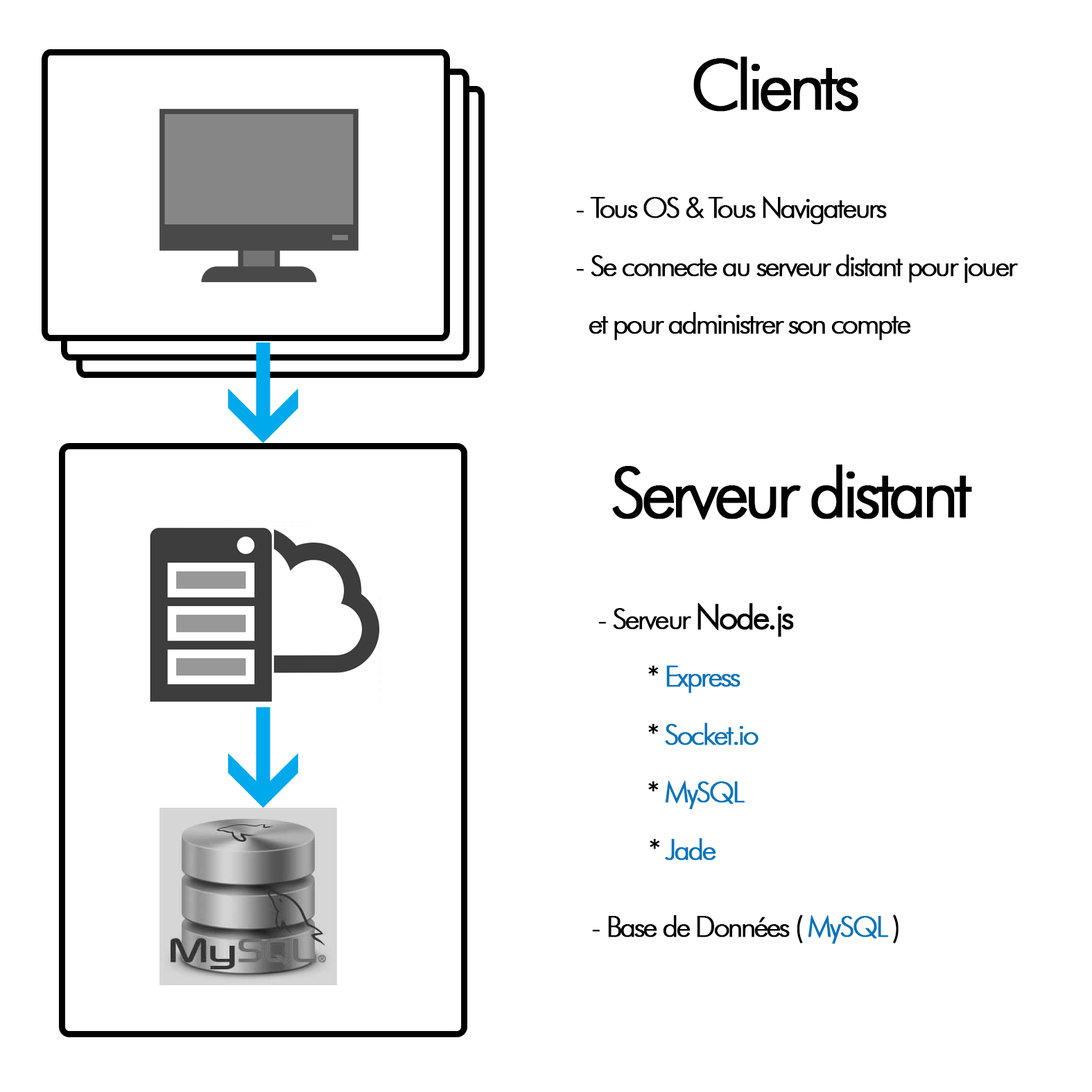
<style>
.page{position:relative;width:1092px;height:1092px;background:#ffffff}
.page>*{position:absolute;margin:0}
.t1{font:69.3px "FuturaBT-Light";letter-spacing:-0.09em;color:#000000;font-weight:bold}
.t2{font:28.9px/57.8px "FuturaBT-Light";letter-spacing:-0.09em;color:#000000;font-weight:bold}
.t3{font:34.7px/57.8px "FuturaBT-Light";letter-spacing:-0.09em;color:#000000;font-weight:bold}
.t4{font:28.9px/57.8px "FuturaBT-Light";letter-spacing:-0.09em;color:#0074ba;font-weight:bold}
.t5{font:28.9px "FuturaBT-Light";letter-spacing:-0.09em;color:#000000;font-weight:bold}
.t6{font:28.9px "FuturaBT-Light";letter-spacing:-0.09em;color:#0074ba;font-weight:bold}
</style>
<div class="page">
<p class="t1" style="left:693px;top:56px;width:165px;height:56px">Clients</p>
<p class="t2" style="left:576px;top:196px;width:442px;height:144px">- Tous OS &amp; Tous Navigateurs<br>- Se connecte au serveur distant pour jouer<br>  et pour administrer son compte</p>
<p class="t1" style="left:612px;top:465px;width:360px;height:55px">Serveur distant</p>
<p class="t2" style="left:598px;top:602px;width:196px;height:258px">- Serveur <span class="t3">Node.js <br></span>  * <span class="t4">Express<br></span>  * <span class="t4">Socket.io<br></span>  * <span class="t4">MySQL<br>     </span>* <span class="t4">Jade</span></p>
<p class="t5" style="left:592px;top:914px;width:307px;height:30px">- Base de Données ( <span class="t6">MySQL </span>)</p>
</div>
